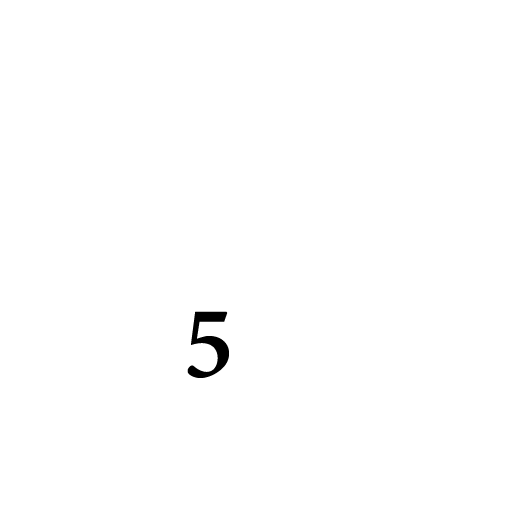
<style>
.page{position:relative;width:512px;height:512px;background:#ffffff}
.page>*{position:absolute;margin:0}
.t1{font:112px "AdobeGurmukhi-Bold";color:#000000}
</style>
<div class="page">
<p class="t1" style="left:187px;top:311px;width:42px;height:67px">5</p>
</div>
